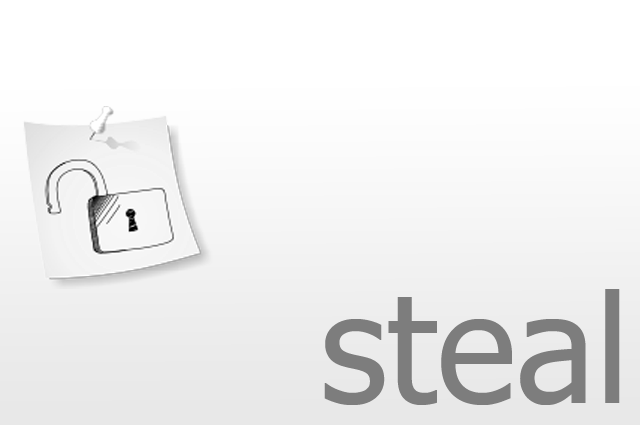
<style>
.page{position:relative;width:640px;height:425px;background:#ffffff}
.page>*{position:absolute;margin:0}
.t1{font:150px "Tahoma";color:#7d7d7d}
</style>
<div class="page">
<p class="t1" style="left:324px;top:289px;width:296px;height:116px">steal</p>
</div>
